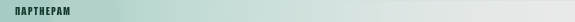
<style>
.page{position:relative;width:575px;height:22px}
.page>*{position:absolute;margin:0}
.t1{font:10px "Impact";letter-spacing:0.1em;color:#183b31}
</style>
<div class="page">
<p class="t1" style="left:15px;top:7px;width:55px;height:8px">ПАРТНЕРАМ</p>
</div>
